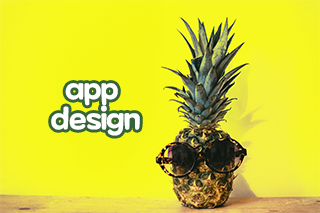
<style>
.page{position:relative;width:320px;height:213px}
.page>*{position:absolute;margin:0}
.t1{font:30px/30px "MaplestoryBold";letter-spacing:-0.025em;color:#ffffff}
</style>
<div class="page">
<p class="t1" style="left:51px;top:83px;width:89px;height:53px;text-align:center">app <br>design</p>
</div>
